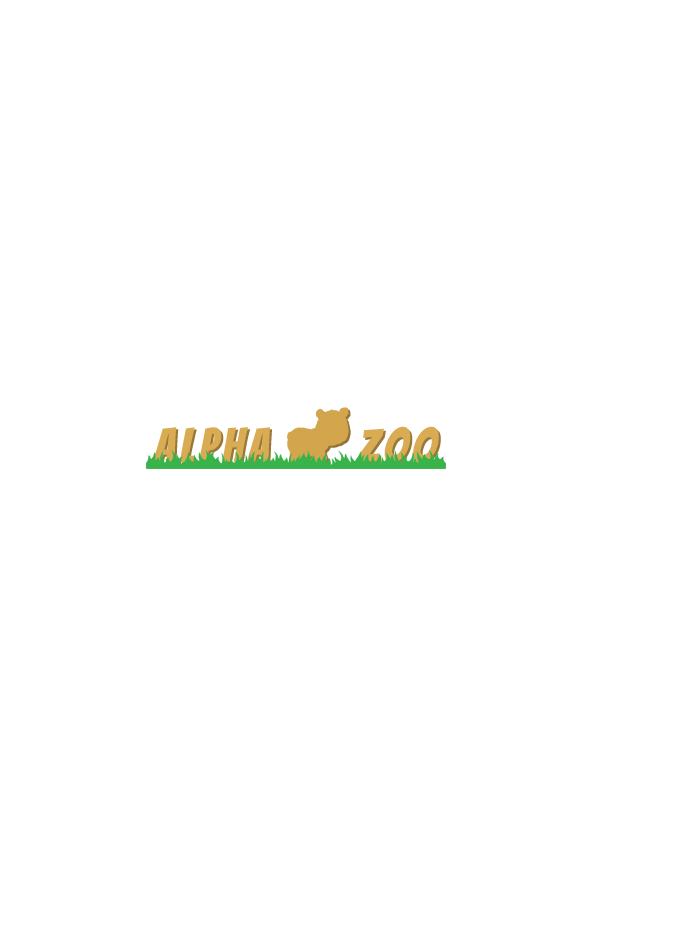
<style>
.page{position:relative;width:677px;height:928px;background:#ffffff}
.page>*{position:absolute;margin:0}
.t1{font:48px "Bangers-Regular";letter-spacing:0.1em;color:#d9ab53}
</style>
<div class="page">
<p class="t1" style="left:152px;top:426px;width:287px;height:38px">ALPHA      ZOO</p>
</div>
